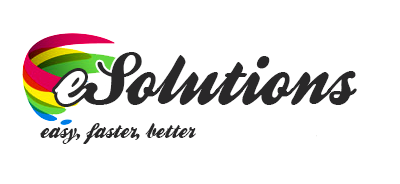
<style>
.page{position:relative;width:400px;height:184px;background:#ffffff}
.page>*{position:absolute;margin:0}
.t1{font:75px "BallparkWeiner";color:#292829}
.t2{font:75px "BallparkWeiner";color:#ffffff}
.t3{font:22.9px "BallparkWeiner";color:#292829}
</style>
<div class="page">
<p class="t1" style="left:83px;top:52px;width:274px;height:53px">Solutions</p>
<p class="t2" style="left:55px;top:71px;width:32px;height:33px">e</p>
<p class="t3" style="left:40px;top:123px;width:156px;height:21px">easy, faster, better</p>
</div>
